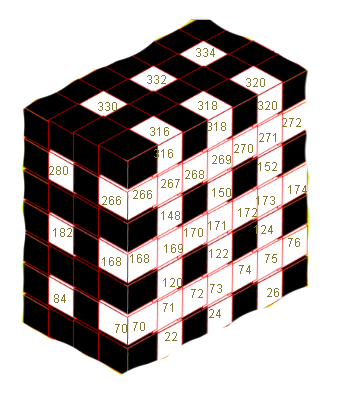
<style>
.page{position:relative;width:337px;height:396px;background:#ffffff}
.page>*{position:absolute;margin:0}
.t1{font:12px "ArialMT";color:#817931}
</style>
<div class="page">
<p class="t1" style="left:196px;top:48px;width:19px;height:9px">334</p>
<p class="t1" style="left:147px;top:75px;width:19px;height:9px">332</p>
<p class="t1" style="left:246px;top:78px;width:19px;height:9px">320</p>
<p class="t1" style="left:98px;top:102px;width:19px;height:9px">330</p>
<p class="t1" style="left:198px;top:101px;width:19px;height:9px">318</p>
<p class="t1" style="left:258px;top:101px;width:19px;height:9px">320</p>
<p class="t1" style="left:207px;top:122px;width:19px;height:9px">318</p>
<p class="t1" style="left:282px;top:118px;width:19px;height:9px">272</p>
<p class="t1" style="left:150px;top:127px;width:19px;height:9px">316</p>
<p class="t1" style="left:259px;top:133px;width:17px;height:9px">271</p>
<p class="t1" style="left:154px;top:149px;width:19px;height:9px">316</p>
<p class="t1" style="left:234px;top:144px;width:19px;height:9px">270</p>
<p class="t1" style="left:212px;top:155px;width:19px;height:9px">269</p>
<p class="t1" style="left:49px;top:166px;width:19px;height:9px">280</p>
<p class="t1" style="left:185px;top:170px;width:19px;height:9px">268</p>
<p class="t1" style="left:258px;top:162px;width:19px;height:9px">152</p>
<p class="t1" style="left:161px;top:179px;width:19px;height:9px">267</p>
<p class="t1" style="left:288px;top:185px;width:19px;height:9px">174</p>
<p class="t1" style="left:102px;top:196px;width:19px;height:9px">266</p>
<p class="t1" style="left:133px;top:190px;width:19px;height:9px">266</p>
<p class="t1" style="left:212px;top:188px;width:19px;height:9px">150</p>
<p class="t1" style="left:256px;top:196px;width:19px;height:9px">173</p>
<p class="t1" style="left:238px;top:208px;width:19px;height:9px">172</p>
<p class="t1" style="left:161px;top:211px;width:19px;height:9px">148</p>
<p class="t1" style="left:208px;top:221px;width:17px;height:9px">171</p>
<p class="t1" style="left:53px;top:228px;width:19px;height:9px">182</p>
<p class="t1" style="left:184px;top:228px;width:19px;height:9px">170</p>
<p class="t1" style="left:254px;top:225px;width:19px;height:9px">124</p>
<p class="t1" style="left:164px;top:244px;width:19px;height:9px">169</p>
<p class="t1" style="left:288px;top:238px;width:12px;height:9px">76</p>
<p class="t1" style="left:102px;top:257px;width:19px;height:9px">168</p>
<p class="t1" style="left:130px;top:254px;width:19px;height:9px">168</p>
<p class="t1" style="left:209px;top:249px;width:19px;height:9px">122</p>
<p class="t1" style="left:265px;top:254px;width:12px;height:9px">75</p>
<p class="t1" style="left:239px;top:265px;width:12px;height:9px">74</p>
<p class="t1" style="left:163px;top:278px;width:19px;height:9px">120</p>
<p class="t1" style="left:54px;top:294px;width:12px;height:9px">84</p>
<p class="t1" style="left:191px;top:289px;width:12px;height:9px">72</p>
<p class="t1" style="left:210px;top:284px;width:12px;height:9px">73</p>
<p class="t1" style="left:267px;top:288px;width:12px;height:9px">26</p>
<p class="t1" style="left:163px;top:303px;width:10px;height:9px">71</p>
<p class="t1" style="left:209px;top:309px;width:12px;height:9px">24</p>
<p class="t1" style="left:115px;top:324px;width:12px;height:9px">70</p>
<p class="t1" style="left:133px;top:322px;width:12px;height:9px">70</p>
<p class="t1" style="left:165px;top:332px;width:12px;height:9px">22</p>
</div>
